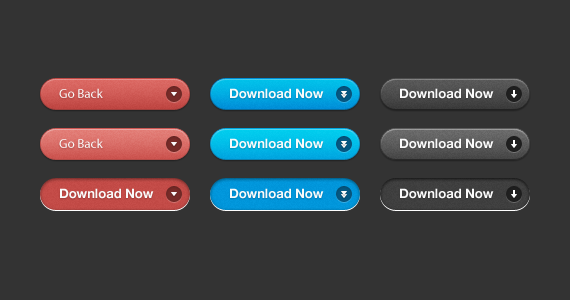
<style>
.page{position:relative;width:570px;height:300px;background:#333333}
.page>*{position:absolute;margin:0}
.t1{font:13px "MyriadPro-Regular";color:#fafafa}
.t2{font:13px "HelveticaNeue-Bold";color:#fafafa}
</style>
<div class="page">
<p class="t1" style="left:59px;top:88px;width:44px;height:10px">Go Back</p>
<p class="t2" style="left:230px;top:88px;width:94px;height:11px">Download Now</p>
<p class="t2" style="left:400px;top:88px;width:94px;height:11px">Download Now</p>
<p class="t1" style="left:59px;top:138px;width:44px;height:10px">Go Back</p>
<p class="t2" style="left:230px;top:138px;width:94px;height:11px">Download Now</p>
<p class="t2" style="left:400px;top:138px;width:94px;height:11px">Download Now</p>
<p class="t2" style="left:60px;top:188px;width:94px;height:11px">Download Now</p>
<p class="t2" style="left:230px;top:188px;width:94px;height:11px">Download Now</p>
<p class="t2" style="left:400px;top:188px;width:94px;height:11px">Download Now</p>
</div>
